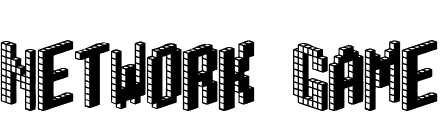
<style>
.page{position:relative;width:440px;height:140px;background:#ffffff}
.page>*{position:absolute;margin:0}
.t1{font:73px "Blox-BRK";color:#000000}
</style>
<div class="page">
<p class="t1" style="left:0px;top:40px;width:438px;height:71px">Network Game</p>
</div>
